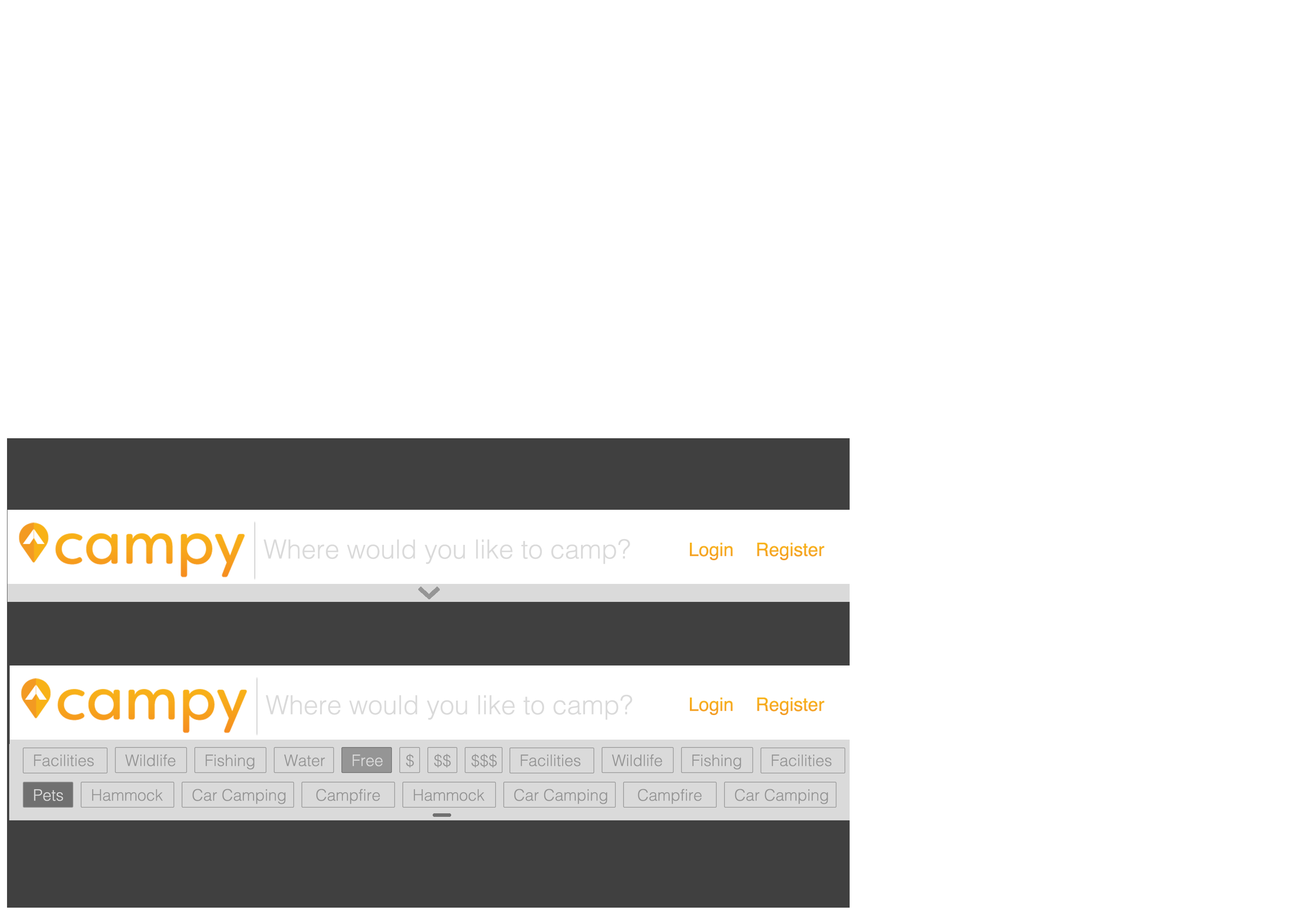
<style>
.page{position:relative;width:1292px;height:923px;background:#ffffff}
.page>*{position:absolute;margin:0}
.t1{font:26.3px "Helvetica-Light";color:#dadada}
.t2{font:15.8px "Helvetica-Light";color:#959595}
.t3{font:15.8px "Helvetica-Light";color:#dadada}
</style>
<div class="page">
<p class="t1" style="left:263px;top:539px;width:367px;height:25px">Where would you like to camp?</p>
<p class="t1" style="left:265px;top:695px;width:367px;height:25px">Where would you like to camp?</p>
<p class="t2" style="left:34px;top:755px;width:60px;height:12px">Facilities</p>
<p class="t2" style="left:125px;top:754px;width:51px;height:13px">Wildlife</p>
<p class="t2" style="left:205px;top:755px;width:49px;height:15px">Fishing</p>
<p class="t2" style="left:284px;top:755px;width:41px;height:12px">Water</p>
<p class="t3" style="left:352px;top:755px;width:31px;height:12px">Free</p>
<p class="t2" style="left:406px;top:754px;width:8px;height:14px">$</p>
<p class="t2" style="left:434px;top:754px;width:17px;height:14px">$$</p>
<p class="t2" style="left:471px;top:754px;width:26px;height:14px">$$$</p>
<p class="t2" style="left:520px;top:755px;width:60px;height:12px">Facilities</p>
<p class="t2" style="left:612px;top:754px;width:50px;height:13px">Wildlife</p>
<p class="t2" style="left:692px;top:755px;width:49px;height:15px">Fishing</p>
<p class="t2" style="left:771px;top:755px;width:60px;height:12px">Facilities</p>
<p class="t3" style="left:34px;top:789px;width:29px;height:12px">Pets</p>
<p class="t2" style="left:92px;top:789px;width:71px;height:12px">Hammock</p>
<p class="t2" style="left:192px;top:789px;width:94px;height:15px">Car Camping</p>
<p class="t2" style="left:316px;top:789px;width:64px;height:15px">Campfire</p>
<p class="t2" style="left:414px;top:789px;width:70px;height:12px">Hammock</p>
<p class="t2" style="left:514px;top:789px;width:93px;height:15px">Car Camping</p>
<p class="t2" style="left:638px;top:789px;width:64px;height:15px">Campfire</p>
<p class="t2" style="left:734px;top:789px;width:94px;height:15px">Car Camping</p>
</div>
